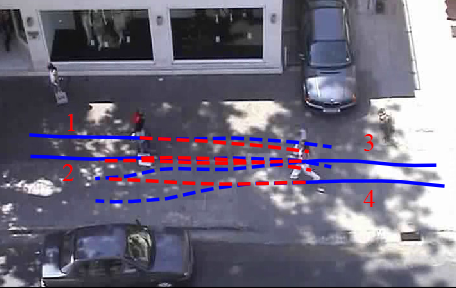
<style>
.page{position:relative;width:456px;height:288px}
.page>*{position:absolute;margin:0}
.t1{font:25px "TimesNewRomanPSMT";color:#ff0000}
</style>
<div class="page">
<p class="t1" style="left:68px;top:114px;width:7px;height:17px">1</p>
<p class="t1" style="left:364px;top:134px;width:10px;height:17px">3</p>
<p class="t1" style="left:62px;top:164px;width:12px;height:17px">2</p>
<p class="t1" style="left:363px;top:190px;width:12px;height:17px">4</p>
</div>
